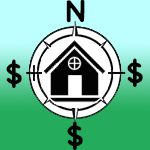
<style>
.page{position:relative;width:150px;height:150px;background:#24ac5c}
.page>*{position:absolute;margin:0}
.t1{font:30px "ChalkboardSE-Bold";color:#030303}
</style>
<div class="page">
<p class="t1" style="left:66px;top:0px;width:19px;height:23px">N</p>
<p class="t1" style="left:6px;top:59px;width:16px;height:29px">$</p>
<p class="t1" style="left:127px;top:58px;width:16px;height:29px">$</p>
<p class="t1" style="left:67px;top:121px;width:16px;height:29px">$</p>
</div>
